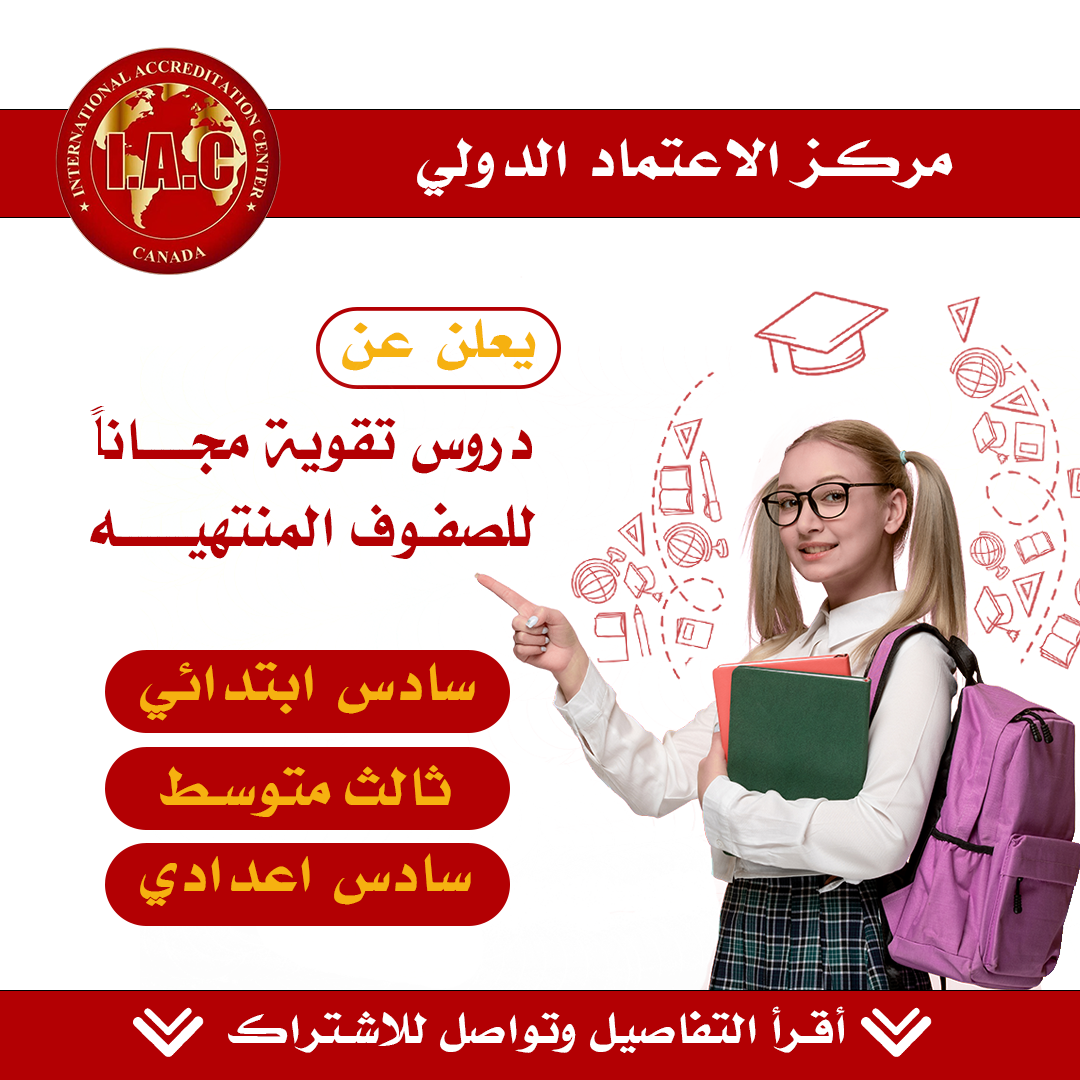
<style>
.page{position:relative;width:1080px;height:1080px;background:#ffffff}
.page>*{position:absolute;margin:0}
.t1{font:60px "mohammad-bold-art-1";letter-spacing:0.025em;color:#ffffff}
.t2{font:60px "mohammad-bold-art-1";letter-spacing:0.025em;color:#f6b110}
.t3{font:65px/86.6px "mohammad-bold-art-1";letter-spacing:0.025em;color:#b30003;scale:0.86 1}
.t4{font:48px "mohammad-bold-art-1";letter-spacing:0.025em;color:#ffffff}
</style>
<div class="page">
<p class="t1" style="left:417px;top:137px;width:536px;height:60px">مركز الاعتماد الدولي</p>
<p class="t2" style="left:342px;top:318px;width:194px;height:53px">يعلن عن</p>
<p class="t3" style="left:90px;top:406px;width:446px;height:154px;text-align:center">دروس تقوية مجــــاناً للصفوف المنتهيــــــه</p>
<p class="t2" style="left:140px;top:662px;width:335px;height:59px">سادس ابتدائي</p>
<p class="t2" style="left:160px;top:765px;width:291px;height:52px">ثالث متوسط</p>
<p class="t2" style="left:140px;top:853px;width:331px;height:53px">سادس اعدادي</p>
<p class="t4" style="left:228px;top:1006px;width:617px;height:47px">أقرأ التفاصيل وتواصل للاشتراك</p>
</div>
